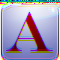
<style>
.page{position:relative;width:60px;height:60px}
.page>*{position:absolute;margin:0}
.t1{font:56px "EngraversMT"}
</style>
<div class="page">
<p class="t1" style="left:6px;top:8px;width:47px;height:39px">A</p>
</div>
